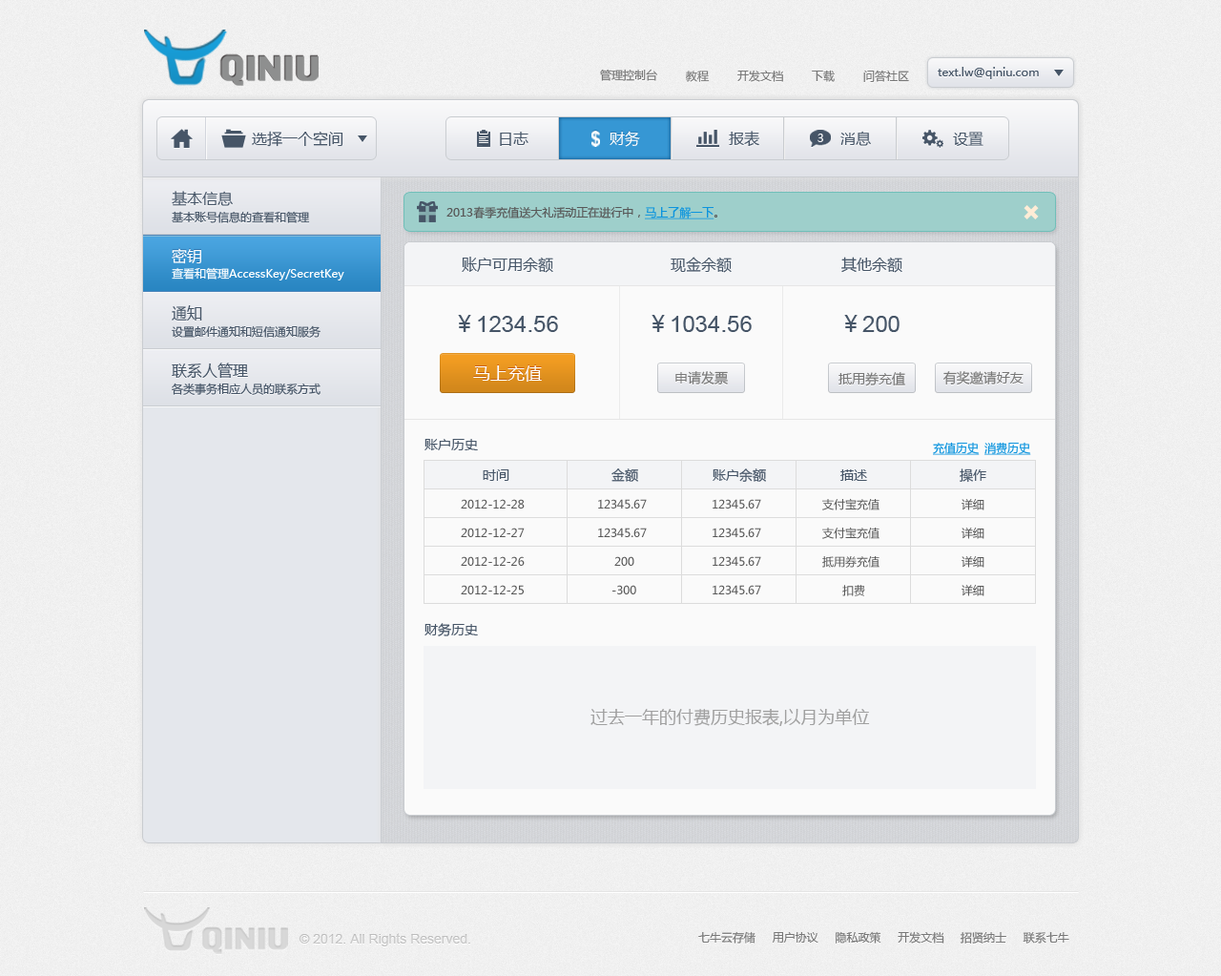
<style>
.page{position:relative;width:1221px;height:976px}
.page>*{position:absolute;margin:0}
.t1{font:11.5px "MicrosoftYaHei";color:#787878}
.t2{font:11.5px "MicrosoftYaHei";color:#465567}
.t3{font:15.3px "MicrosoftYaHei";color:#465567}
.t4{font:15.3px "MicrosoftYaHei";color:#ffffff}
.t5{font:11.5px "MicrosoftYaHei";color:#f8f8f9}
.t6{font:11.5px "MicrosoftYaHei";color:#585858}
.t7{font:11.5px "MicrosoftYaHei";color:#0c94de;text-decoration:underline}
.t8{font:15.3px "MicrosoftYaHei";color:#585858}
.t9{font:11.5px "MicrosoftYaHei";color:#ffffff}
.t10{font:22.9px "ArialMT";color:#465567}
.t11{font:22.9px "MicrosoftYaHei";color:#465567}
.t12{font:17.2px "MicrosoftYaHei";color:#ffffff}
.t13{font:13.4px "MicrosoftYaHei";color:#787878}
.t14{font:13.4px "MicrosoftYaHei";color:#465567}
.t15{font:17.2px "MicrosoftYaHei";color:#a1a1a1}
.t16{font:13.4px "ArialMT";color:#c6c6c6}
</style>
<div class="page">
<p class="t1" style="left:600px;top:69px;width:57px;height:12px">管理控制台</p>
<p class="t1" style="left:686px;top:71px;width:24px;height:11px">教程</p>
<p class="t1" style="left:738px;top:70px;width:45px;height:12px">开发文档</p>
<p class="t1" style="left:812px;top:70px;width:23px;height:12px">下载</p>
<p class="t1" style="left:864px;top:70px;width:45px;height:12px">问答社区</p>
<p class="t2" style="left:938px;top:67px;width:101px;height:12px">text.lw@qiniu.com</p>
<p class="t3" style="left:252px;top:131px;width:92px;height:16px">选择一个空间</p>
<p class="t3" style="left:500px;top:132px;width:29px;height:14px">日志</p>
<p class="t4" style="left:610px;top:131px;width:30px;height:16px">财务</p>
<p class="t3" style="left:729px;top:131px;width:31px;height:16px">报表</p>
<p class="t5" style="left:818px;top:134px;width:6px;height:8px">3</p>
<p class="t3" style="left:841px;top:131px;width:30px;height:15px">消息</p>
<p class="t3" style="left:953px;top:132px;width:31px;height:14px">设置</p>
<p class="t3" style="left:172px;top:191px;width:61px;height:15px">基本信息</p>
<p class="t6" style="left:447px;top:206px;width:271px;height:13px">2013春季充值送大礼活动正在进行中，<span class="t7">马上了解一下</span>。</p>
<p class="t2" style="left:172px;top:211px;width:138px;height:12px">基本账号信息的查看和管理</p>
<p class="t4" style="left:172px;top:248px;width:29px;height:16px">密钥</p>
<p class="t8" style="left:462px;top:257px;width:91px;height:16px">账户可用余额</p>
<p class="t8" style="left:671px;top:257px;width:61px;height:16px">现金余额</p>
<p class="t8" style="left:842px;top:257px;width:61px;height:16px">其他余额</p>
<p class="t9" style="left:172px;top:267px;width:172px;height:14px">查看和管理AccessKey/SecretKey</p>
<p class="t3" style="left:172px;top:305px;width:30px;height:16px">通知</p>
<p class="t10" style="left:458px;top:315px;width:100px;height:17px"><span class="t11">￥</span>1234.56</p>
<p class="t10" style="left:652px;top:315px;width:100px;height:17px"><span class="t11">￥</span>1034.56</p>
<p class="t10" style="left:845px;top:315px;width:55px;height:17px"><span class="t11">￥</span>200</p>
<p class="t2" style="left:172px;top:325px;width:149px;height:13px">设置邮件通知和短信通知服务</p>
<p class="t3" style="left:172px;top:363px;width:76px;height:16px">联系人管理</p>
<p class="t12" style="left:473px;top:365px;width:69px;height:17px">马上充值</p>
<p class="t13" style="left:676px;top:371px;width:52px;height:14px">申请发票</p>
<p class="t13" style="left:839px;top:372px;width:67px;height:14px">抵用券充值</p>
<p class="t13" style="left:944px;top:371px;width:80px;height:15px">有奖邀请好友</p>
<p class="t2" style="left:172px;top:383px;width:149px;height:12px">各类事务相应人员的联系方式</p>
<p class="t14" style="left:425px;top:439px;width:53px;height:11px">账户历史</p>
<p class="t7" style="left:933px;top:442px;width:47px;height:13px">充值历史</p>
<p class="t7" style="left:985px;top:442px;width:47px;height:13px">消费历史</p>
<p class="t14" style="left:483px;top:470px;width:27px;height:11px">时间</p>
<p class="t14" style="left:612px;top:469px;width:26px;height:13px">金额</p>
<p class="t14" style="left:713px;top:469px;width:53px;height:13px">账户余额</p>
<p class="t14" style="left:841px;top:470px;width:26px;height:11px">描述</p>
<p class="t14" style="left:960px;top:469px;width:27px;height:14px">操作</p>
<p class="t6" style="left:461px;top:499px;width:64px;height:10px">2012-12-28</p>
<p class="t6" style="left:598px;top:499px;width:49px;height:10px">12345.67</p>
<p class="t6" style="left:713px;top:499px;width:49px;height:10px">12345.67</p>
<p class="t6" style="left:823px;top:498px;width:57px;height:13px">支付宝充值</p>
<p class="t6" style="left:962px;top:499px;width:23px;height:12px">详细</p>
<p class="t6" style="left:461px;top:528px;width:64px;height:9px">2012-12-27</p>
<p class="t6" style="left:598px;top:528px;width:49px;height:9px">12345.67</p>
<p class="t6" style="left:713px;top:528px;width:49px;height:9px">12345.67</p>
<p class="t6" style="left:823px;top:527px;width:57px;height:12px">支付宝充值</p>
<p class="t6" style="left:962px;top:528px;width:23px;height:11px">详细</p>
<p class="t6" style="left:461px;top:556px;width:64px;height:10px">2012-12-26</p>
<p class="t6" style="left:615px;top:556px;width:20px;height:10px">200</p>
<p class="t6" style="left:713px;top:556px;width:49px;height:10px">12345.67</p>
<p class="t6" style="left:823px;top:556px;width:57px;height:12px">抵用券充值</p>
<p class="t6" style="left:962px;top:556px;width:23px;height:12px">详细</p>
<p class="t6" style="left:461px;top:585px;width:63px;height:10px">2012-12-25</p>
<p class="t6" style="left:613px;top:585px;width:24px;height:10px">-300</p>
<p class="t6" style="left:713px;top:585px;width:49px;height:10px">12345.67</p>
<p class="t6" style="left:843px;top:585px;width:23px;height:11px">扣费</p>
<p class="t6" style="left:962px;top:585px;width:23px;height:11px">详细</p>
<p class="t14" style="left:425px;top:623px;width:53px;height:14px">财务历史</p>
<p class="t15" style="left:591px;top:709px;width:279px;height:17px">过去一年的付费历史报表,以月为单位</p>
<p class="t16" style="left:299px;top:933px;width:171px;height:14px">© 2012. All Rights Reserved.</p>
<p class="t1" style="left:699px;top:931px;width:371px;height:13px">七牛云存储     用户协议     隐私政策     开发文档     招贤纳士     联系七牛</p>
</div>
